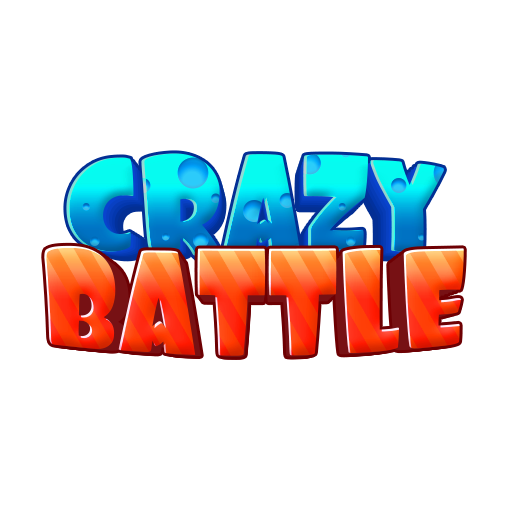
<style>
.page{position:relative;width:512px;height:512px;background:#ffffff}
.page>*{position:absolute;margin:0}
.t1{font:122.5px "Foo-Regular";letter-spacing:-0.01em}
.t2{font:120.1px "Foo-Regular";letter-spacing:-0.01em}
.t3{font:117.6px "Foo-Regular";letter-spacing:-0.01em}
.t4{font:115.3px "Foo-Regular";letter-spacing:-0.01em}
.t5{font:113px "Foo-Regular";letter-spacing:-0.01em}
.t6{font:110.7px "Foo-Regular";letter-spacing:-0.01em}
.t7{font:134.8px "Foo-Regular";letter-spacing:-0.005em;scale:0.91 1}
.t8{font:132.1px "Foo-Regular";letter-spacing:-0.005em;scale:0.91 1}
.t9{font:129.4px "Foo-Regular";letter-spacing:-0.005em;scale:0.91 1}
.t10{font:126.8px "Foo-Regular";letter-spacing:-0.005em;scale:0.91 1}
.t11{font:124.3px "Foo-Regular";letter-spacing:-0.005em;scale:0.91 1}
</style>
<div class="page">
<p class="t1" style="left:70px;top:156px;width:371px;height:101px">CRAZY</p>
<p class="t2" style="left:73px;top:159px;width:364px;height:99px">CRAZY</p>
<p class="t3" style="left:77px;top:162px;width:356px;height:97px">CRAZY</p>
<p class="t4" style="left:80px;top:165px;width:350px;height:95px">CRAZY</p>
<p class="t5" style="left:84px;top:168px;width:342px;height:93px">CRAZY</p>
<p class="t6" style="left:87px;top:171px;width:336px;height:91px">CRAZY</p>
<p class="t7" style="left:48px;top:248px;width:412px;height:108px">BATTLE</p>
<p class="t8" style="left:52px;top:250px;width:404px;height:107px">BATTLE</p>
<p class="t9" style="left:56px;top:252px;width:396px;height:105px">BATTLE</p>
<p class="t10" style="left:60px;top:255px;width:388px;height:102px">BATTLE</p>
<p class="t11" style="left:64px;top:257px;width:380px;height:100px">BATTLE</p>
</div>
